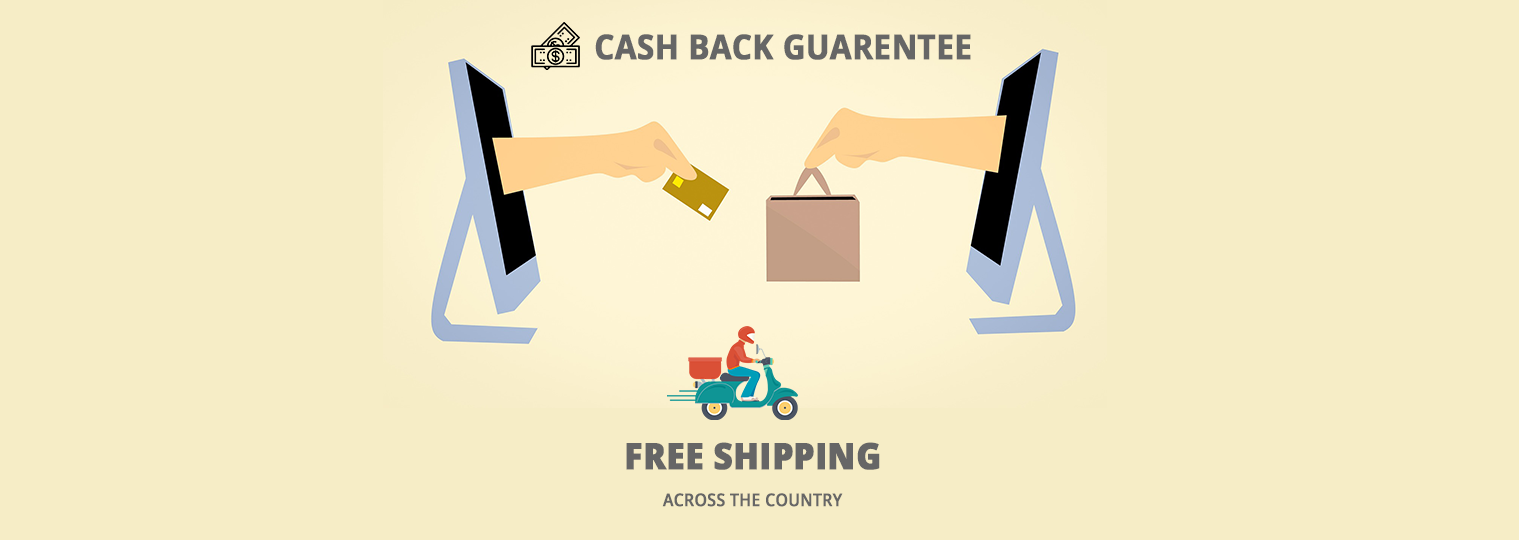
<style>
.page{position:relative;width:1519px;height:540px;background:#f6edc6}
.page>*{position:absolute;margin:0}
.t1{font:34.3px "OpenSans-Bold";color:#666666;font-weight:bold;scale:0.9 1}
.t2{font:36.6px "OpenSans-ExtraBold";color:#666666;font-weight:bold;scale:0.9 1}
.t3{font:17.4px "OpenSans-Semibold";color:#666666;font-weight:bold;scale:0.9 1}
</style>
<div class="page">
<p class="t1" style="left:595px;top:34px;width:376px;height:26px">CASH BACK GUARENTEE</p>
<p class="t2" style="left:626px;top:442px;width:254px;height:28px">FREE SHIPPING</p>
<p class="t3" style="left:662px;top:493px;width:181px;height:14px">ACROSS THE COUNTRY</p>
</div>
